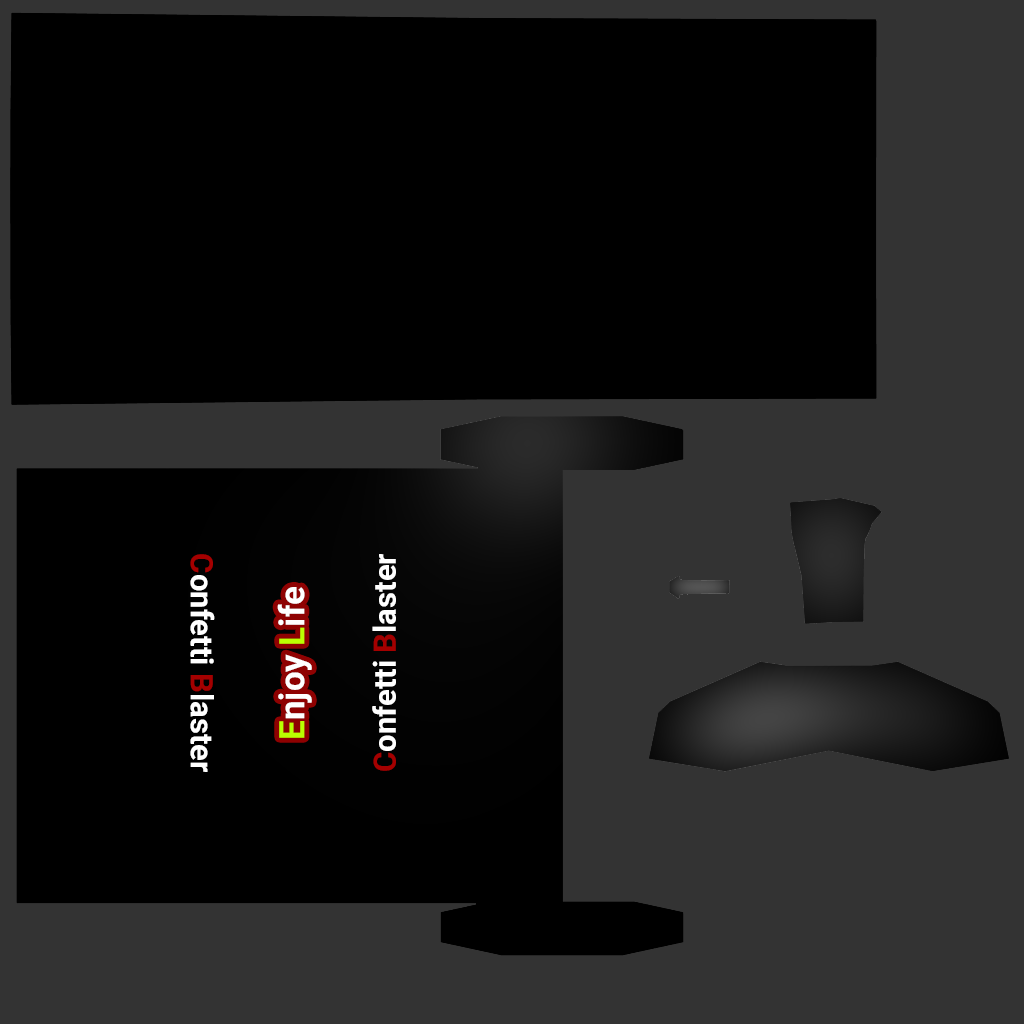
<style>
.page{position:relative;width:1024px;height:1024px;background:#000000}
.page>*{position:absolute;margin:0}
.t1{font:31px "Roboto-Bold";color:#ffffff}
.t2{font:31px "Roboto-Bold";color:#a50000}
.t3{font:31px "Roboto-Bold";color:#a40000}
.t4{font:35px "Roboto-Bold";color:#ffffff}
.t5{font:35px "Roboto-Bold";color:#baff00}
</style>
<div class="page">
<p class="t1" style="left:190px;top:554px;width:25px;height:218px;rotate:90deg"><span class="t2">C</span>onfetti <span class="t3">B</span>laster</p>
<p class="t1" style="left:372px;top:554px;width:24px;height:217px;rotate:-90deg"><span class="t2">C</span>onfetti <span class="t3">B</span>laster</p>
<p class="t4" style="left:277px;top:587px;width:35px;height:151px;rotate:-90deg"><span class="t5">E</span>njoy <span class="t5">L</span>ife</p>
</div>
